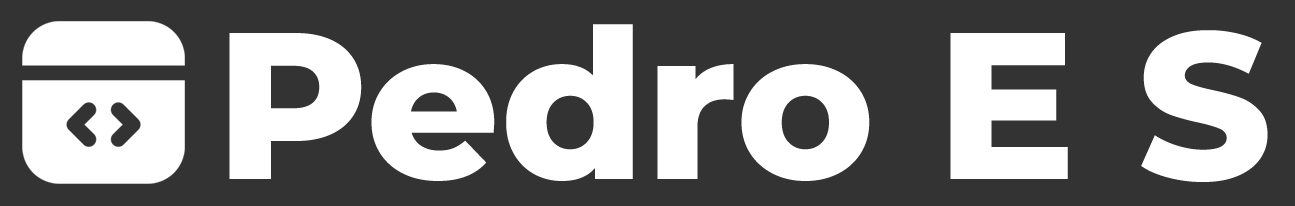
<style>
.page{position:relative;width:1295px;height:206px;background:#333333}
.page>*{position:absolute;margin:0}
.t1{font:208.3px "Montserrat-ExtraBold";color:#ffffff}
</style>
<div class="page">
<p class="t1" style="left:229px;top:24px;width:1039px;height:158px">Pedro E S</p>
</div>
